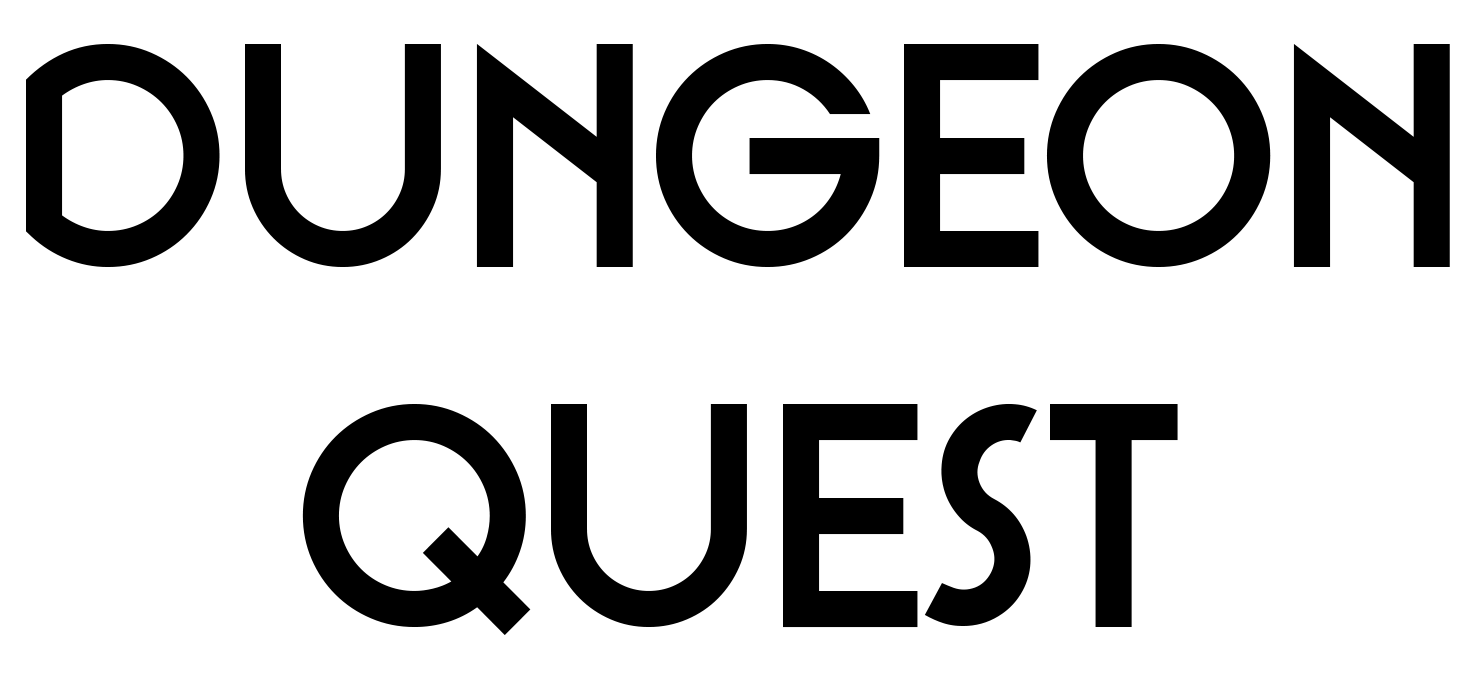
<style>
.page{position:relative;width:1473px;height:695px;background:#ffffff}
.page>*{position:absolute;margin:0}
.t1{font:300px "ArtographieBold";color:#000000}
</style>
<div class="page">
<p class="t1" style="left:26px;top:44px;width:1424px;height:591px;text-align:center">DUNGEON <br>QUEST</p>
</div>
